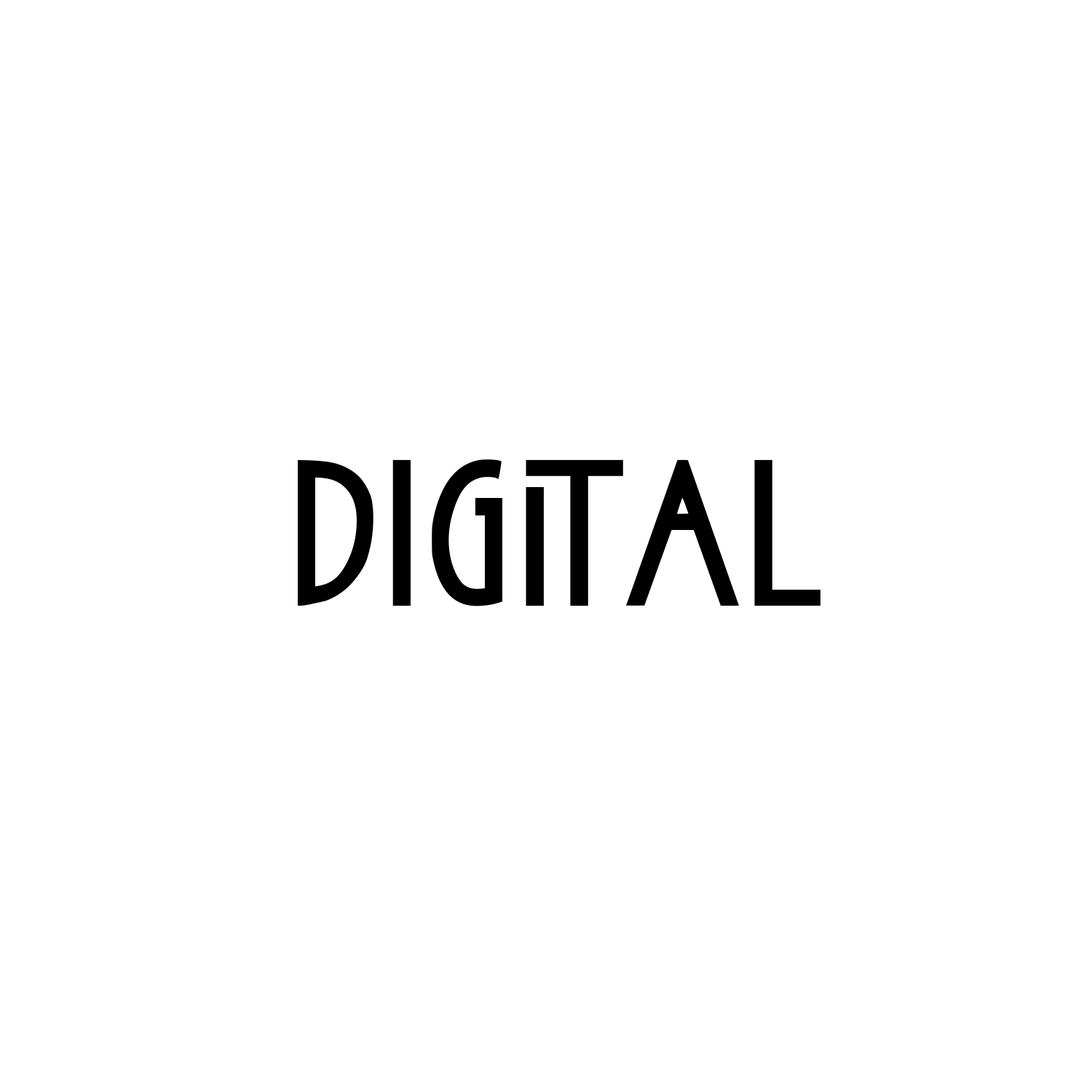
<style>
.page{position:relative;width:1092px;height:1092px;background:#ffffff}
.page>*{position:absolute;margin:0}
.t1{font:218.4px "AmericanHorrorStory-Regular";letter-spacing:0.005em;color:#000000}
</style>
<div class="page">
<p class="t1" style="left:298px;top:459px;width:522px;height:147px">DIGITAL</p>
</div>
